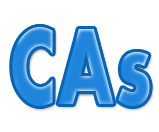
<style>
.page{position:relative;width:159px;height:132px;background:#ffffff}
.page>*{position:absolute;margin:0}
.t1{font:112.4px "Aharoni-Bold";letter-spacing:0.025em;color:#1f85dc;scale:0.7 1}
</style>
<div class="page">
<p class="t1" style="left:12px;top:27px;width:138px;height:79px">CAs</p>
</div>
